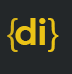
<style>
.page{position:relative;width:72px;height:74px;background:#232729}
.page>*{position:absolute;margin:0}
.t1{font:36px "CenturyGothic";color:#d7b319}
.t2{font:36px "CenturyGothic-Bold";color:#ebc316}
.t3{font:36px "CenturyGothic";color:#ebc316}
</style>
<div class="page">
<p class="t1" style="left:7px;top:18px;width:11px;height:34px">{</p>
<p class="t2" style="left:15px;top:18px;width:31px;height:27px">di</p>
<p class="t3" style="left:48px;top:18px;width:11px;height:34px">}</p>
</div>
